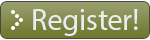
<style>
.page{position:relative;width:150px;height:40px}
.page>*{position:absolute;margin:0}
.t1{font:30px "MyriadPro-Regular";color:#ececec}
</style>
<div class="page">
<p class="t1" style="left:33px;top:9px;width:105px;height:27px">Register!</p>
</div>
